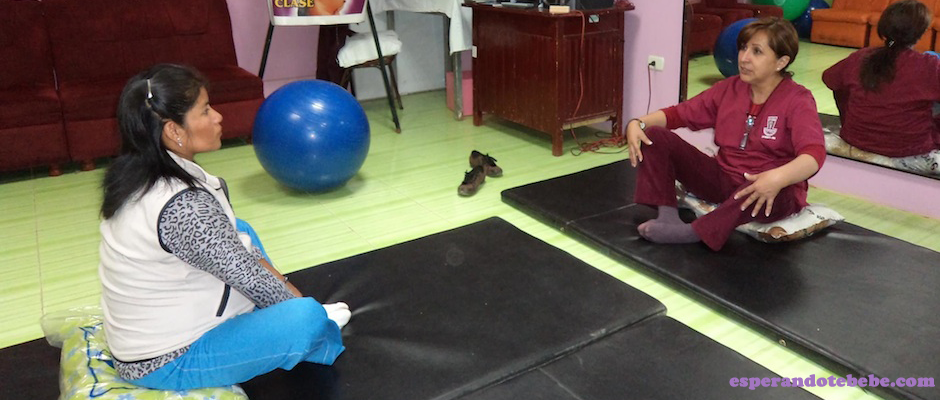
<style>
.page{position:relative;width:940px;height:400px}
.page>*{position:absolute;margin:0}
.t1{font:18px "CooperBlack";color:#a376c1;font-weight:bold}
</style>
<div class="page">
<p class="t1" style="left:729px;top:374px;width:206px;height:16px">esperandotebebe.com</p>
</div>
